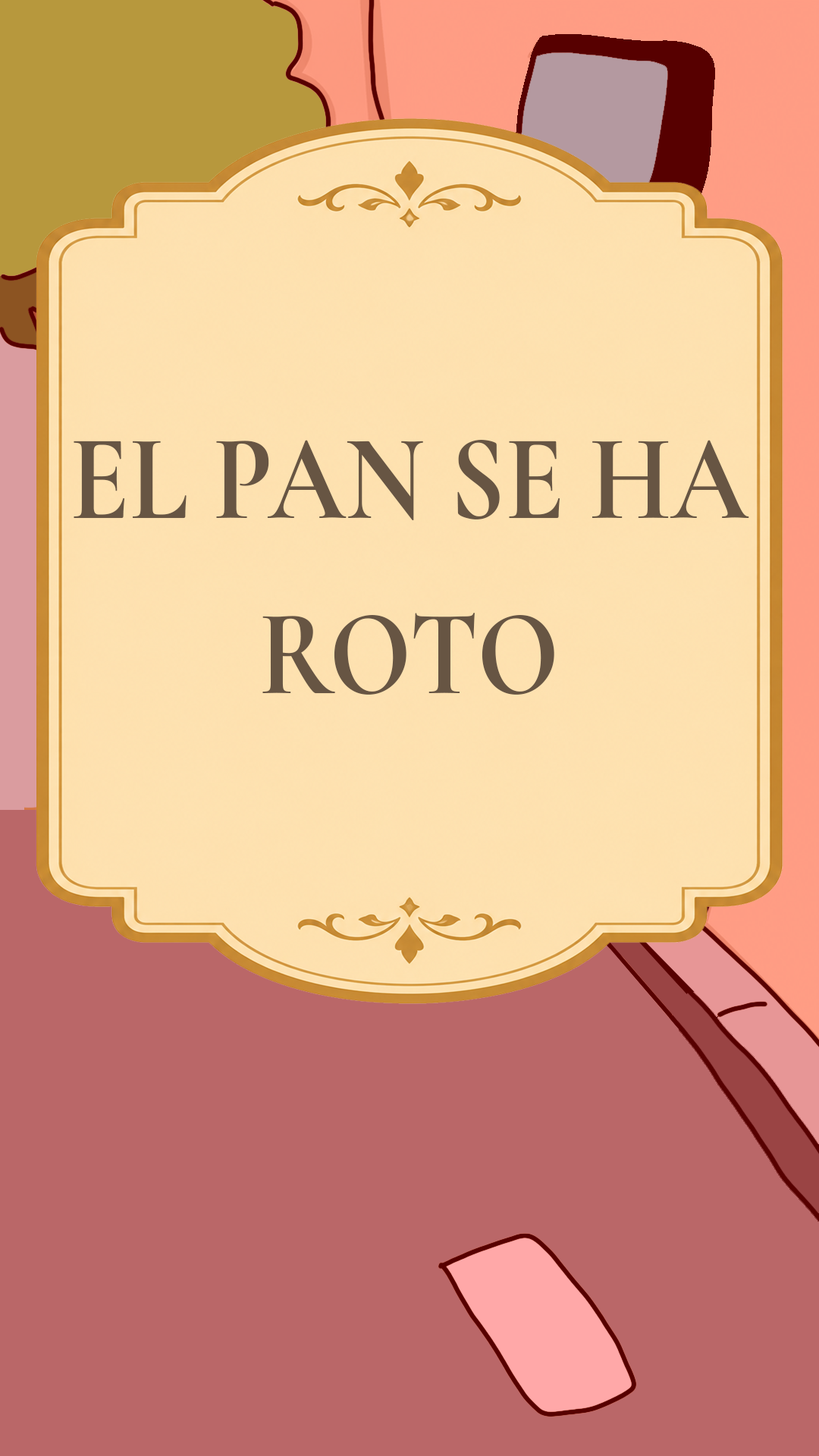
<style>
.page{position:relative;width:819px;height:1456px;background:#ba6768}
.page>*{position:absolute;margin:0}
.t1{font:122.7px/175.6px "CormorantGaramond-Bold";color:#675543;scale:0.88 1}
</style>
<div class="page">
<p class="t1" style="left:74px;top:440px;width:675px;height:255px;text-align:center">EL PAN SE HA<br>ROTO</p>
</div>
